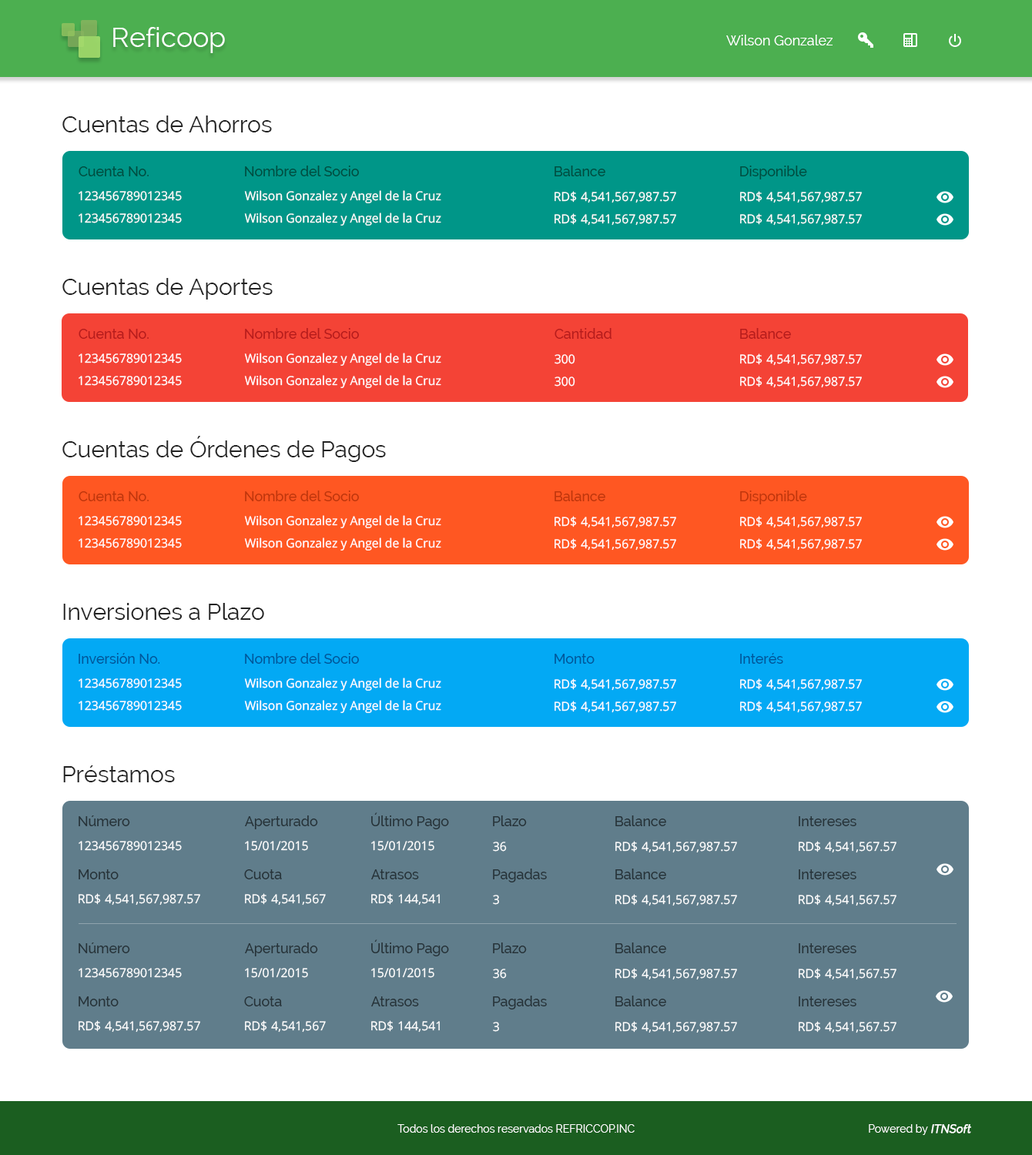
<style>
.page{position:relative;width:1032px;height:1155px;background:#ffffff}
.page>*{position:absolute;margin:0}
.t1{font:27.7px "Raleway";color:#ffffff}
.t2{font:23.1px "Raleway";color:#232323}
.t3{font:13.9px "Raleway-Medium";color:#004d40}
.t4{font:12.3px "OpenSans";color:#ffffff}
.t5{font:13.9px "Raleway-Medium";color:#b71c1c}
.t6{font:13.9px "Raleway-Medium";color:#bf360c}
.t7{font:13.9px "Raleway-Medium";color:#01579b}
.t8{font:13.9px "Raleway-Medium";color:#263238}
</style>
<div class="page">
<p class="t1" style="left:113px;top:27px;width:112px;height:26px">Reficoop</p>
<p class="t2" style="left:62px;top:116px;width:210px;height:16px">Cuentas de Ahorros</p>
<p class="t3" style="left:79px;top:166px;width:70px;height:10px">Cuenta No.</p>
<p class="t3" style="left:245px;top:166px;width:114px;height:10px">Nombre del Socio</p>
<p class="t3" style="left:555px;top:166px;width:50px;height:10px">Balance</p>
<p class="t3" style="left:740px;top:166px;width:67px;height:13px">Disponible</p>
<p class="t4" style="left:79px;top:191px;width:103px;height:10px">123456789012345</p>
<p class="t4" style="left:244px;top:190px;width:197px;height:13px">Wilson Gonzalez y Angel de la Cruz</p>
<p class="t4" style="left:555px;top:191px;width:121px;height:12px">RD$ 4,541,567,987.57</p>
<p class="t4" style="left:740px;top:191px;width:122px;height:12px">RD$ 4,541,567,987.57</p>
<p class="t4" style="left:79px;top:213px;width:103px;height:10px">123456789012345</p>
<p class="t4" style="left:244px;top:213px;width:197px;height:13px">Wilson Gonzalez y Angel de la Cruz</p>
<p class="t4" style="left:555px;top:213px;width:121px;height:13px">RD$ 4,541,567,987.57</p>
<p class="t4" style="left:740px;top:213px;width:122px;height:13px">RD$ 4,541,567,987.57</p>
<p class="t2" style="left:62px;top:278px;width:211px;height:22px">Cuentas de Aportes</p>
<p class="t5" style="left:79px;top:329px;width:70px;height:10px">Cuenta No.</p>
<p class="t5" style="left:245px;top:328px;width:114px;height:11px">Nombre del Socio</p>
<p class="t5" style="left:555px;top:328px;width:57px;height:11px">Cantidad</p>
<p class="t5" style="left:740px;top:328px;width:51px;height:11px">Balance</p>
<p class="t4" style="left:79px;top:354px;width:103px;height:10px">123456789012345</p>
<p class="t4" style="left:244px;top:353px;width:197px;height:13px">Wilson Gonzalez y Angel de la Cruz</p>
<p class="t4" style="left:740px;top:354px;width:122px;height:12px">RD$ 4,541,567,987.57</p>
<p class="t4" style="left:555px;top:354px;width:20px;height:10px">300</p>
<p class="t4" style="left:79px;top:376px;width:103px;height:10px">123456789012345</p>
<p class="t4" style="left:244px;top:375px;width:197px;height:13px">Wilson Gonzalez y Angel de la Cruz</p>
<p class="t4" style="left:555px;top:377px;width:20px;height:10px">300</p>
<p class="t4" style="left:740px;top:376px;width:122px;height:12px">RD$ 4,541,567,987.57</p>
<p class="t2" style="left:62px;top:436px;width:324px;height:26px">Cuentas de Órdenes de Pagos</p>
<p class="t6" style="left:79px;top:491px;width:70px;height:10px">Cuenta No.</p>
<p class="t6" style="left:245px;top:491px;width:114px;height:10px">Nombre del Socio</p>
<p class="t6" style="left:555px;top:491px;width:50px;height:10px">Balance</p>
<p class="t6" style="left:740px;top:491px;width:67px;height:13px">Disponible</p>
<p class="t4" style="left:79px;top:516px;width:103px;height:10px">123456789012345</p>
<p class="t4" style="left:244px;top:515px;width:197px;height:13px">Wilson Gonzalez y Angel de la Cruz</p>
<p class="t4" style="left:555px;top:516px;width:121px;height:12px">RD$ 4,541,567,987.57</p>
<p class="t4" style="left:740px;top:516px;width:122px;height:12px">RD$ 4,541,567,987.57</p>
<p class="t4" style="left:79px;top:538px;width:103px;height:10px">123456789012345</p>
<p class="t4" style="left:244px;top:538px;width:197px;height:13px">Wilson Gonzalez y Angel de la Cruz</p>
<p class="t4" style="left:555px;top:538px;width:121px;height:13px">RD$ 4,541,567,987.57</p>
<p class="t4" style="left:740px;top:538px;width:122px;height:13px">RD$ 4,541,567,987.57</p>
<p class="t2" style="left:63px;top:603px;width:201px;height:17px">Inversiones a Plazo</p>
<p class="t7" style="left:79px;top:653px;width:81px;height:11px">Inversión No.</p>
<p class="t7" style="left:245px;top:653px;width:114px;height:11px">Nombre del Socio</p>
<p class="t7" style="left:555px;top:654px;width:40px;height:10px">Monto</p>
<p class="t7" style="left:740px;top:653px;width:43px;height:11px">Interés</p>
<p class="t4" style="left:244px;top:678px;width:197px;height:13px">Wilson Gonzalez y Angel de la Cruz</p>
<p class="t4" style="left:79px;top:679px;width:103px;height:10px">123456789012345</p>
<p class="t4" style="left:555px;top:679px;width:121px;height:12px">RD$ 4,541,567,987.57</p>
<p class="t4" style="left:740px;top:679px;width:122px;height:12px">RD$ 4,541,567,987.57</p>
<p class="t4" style="left:79px;top:701px;width:103px;height:10px">123456789012345</p>
<p class="t4" style="left:244px;top:700px;width:197px;height:13px">Wilson Gonzalez y Angel de la Cruz</p>
<p class="t4" style="left:555px;top:701px;width:121px;height:12px">RD$ 4,541,567,987.57</p>
<p class="t4" style="left:740px;top:701px;width:122px;height:12px">RD$ 4,541,567,987.57</p>
<p class="t2" style="left:63px;top:766px;width:112px;height:17px">Préstamos</p>
<p class="t8" style="left:79px;top:816px;width:51px;height:10px">Número</p>
<p class="t8" style="left:245px;top:816px;width:73px;height:14px">Aperturado</p>
<p class="t8" style="left:371px;top:813px;width:78px;height:17px">Último Pago</p>
<p class="t8" style="left:493px;top:816px;width:34px;height:10px">Plazo</p>
<p class="t8" style="left:615px;top:816px;width:51px;height:10px">Balance</p>
<p class="t8" style="left:799px;top:816px;width:57px;height:10px">Intereses</p>
<p class="t4" style="left:79px;top:841px;width:103px;height:10px">123456789012345</p>
<p class="t4" style="left:245px;top:841px;width:63px;height:10px">15/01/2015</p>
<p class="t4" style="left:371px;top:841px;width:63px;height:10px">15/01/2015</p>
<p class="t4" style="left:493px;top:842px;width:14px;height:10px">36</p>
<p class="t4" style="left:615px;top:841px;width:122px;height:12px">RD$ 4,541,567,987.57</p>
<p class="t4" style="left:799px;top:841px;width:98px;height:12px">RD$ 4,541,567.57</p>
<p class="t8" style="left:79px;top:870px;width:40px;height:10px">Monto</p>
<p class="t8" style="left:244px;top:870px;width:38px;height:10px">Cuota</p>
<p class="t8" style="left:371px;top:870px;width:48px;height:10px">Atrasos</p>
<p class="t8" style="left:493px;top:869px;width:54px;height:14px">Pagadas</p>
<p class="t8" style="left:615px;top:869px;width:51px;height:11px">Balance</p>
<p class="t8" style="left:799px;top:870px;width:57px;height:10px">Intereses</p>
<p class="t4" style="left:79px;top:893px;width:121px;height:13px">RD$ 4,541,567,987.57</p>
<p class="t4" style="left:245px;top:893px;width:81px;height:13px">RD$ 4,541,567</p>
<p class="t4" style="left:371px;top:893px;width:69px;height:13px">RD$ 144,541</p>
<p class="t4" style="left:493px;top:895px;width:6px;height:10px">3</p>
<p class="t4" style="left:615px;top:894px;width:122px;height:13px">RD$ 4,541,567,987.57</p>
<p class="t4" style="left:799px;top:894px;width:98px;height:13px">RD$ 4,541,567.57</p>
<p class="t8" style="left:371px;top:940px;width:78px;height:17px">Último Pago</p>
<p class="t8" style="left:79px;top:943px;width:51px;height:11px">Número</p>
<p class="t8" style="left:245px;top:943px;width:73px;height:14px">Aperturado</p>
<p class="t8" style="left:493px;top:943px;width:34px;height:11px">Plazo</p>
<p class="t8" style="left:615px;top:943px;width:51px;height:11px">Balance</p>
<p class="t8" style="left:799px;top:944px;width:57px;height:10px">Intereses</p>
<p class="t4" style="left:79px;top:968px;width:103px;height:10px">123456789012345</p>
<p class="t4" style="left:245px;top:968px;width:63px;height:10px">15/01/2015</p>
<p class="t4" style="left:371px;top:968px;width:63px;height:10px">15/01/2015</p>
<p class="t4" style="left:493px;top:969px;width:14px;height:10px">36</p>
<p class="t4" style="left:615px;top:968px;width:122px;height:12px">RD$ 4,541,567,987.57</p>
<p class="t4" style="left:799px;top:968px;width:98px;height:12px">RD$ 4,541,567.57</p>
<p class="t8" style="left:79px;top:997px;width:40px;height:10px">Monto</p>
<p class="t8" style="left:244px;top:997px;width:38px;height:10px">Cuota</p>
<p class="t8" style="left:371px;top:997px;width:48px;height:10px">Atrasos</p>
<p class="t8" style="left:493px;top:996px;width:54px;height:14px">Pagadas</p>
<p class="t8" style="left:615px;top:996px;width:51px;height:11px">Balance</p>
<p class="t8" style="left:799px;top:997px;width:57px;height:10px">Intereses</p>
<p class="t4" style="left:79px;top:1021px;width:121px;height:12px">RD$ 4,541,567,987.57</p>
<p class="t4" style="left:245px;top:1021px;width:81px;height:12px">RD$ 4,541,567</p>
<p class="t4" style="left:371px;top:1021px;width:69px;height:12px">RD$ 144,541</p>
<p class="t4" style="left:493px;top:1022px;width:6px;height:10px">3</p>
<p class="t4" style="left:615px;top:1021px;width:122px;height:13px">RD$ 4,541,567,987.57</p>
<p class="t4" style="left:799px;top:1021px;width:98px;height:13px">RD$ 4,541,567.57</p>
</div>
